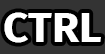
<style>
.page{position:relative;width:105px;height:54px;background:#333333}
.page>*{position:absolute;margin:0}
.t1{font:41.8px "FiraSans-Bold";color:#ffffff;scale:1.05 1}
</style>
<div class="page">
<p class="t1" style="left:4px;top:12px;width:97px;height:31px">CTRL</p>
</div>
